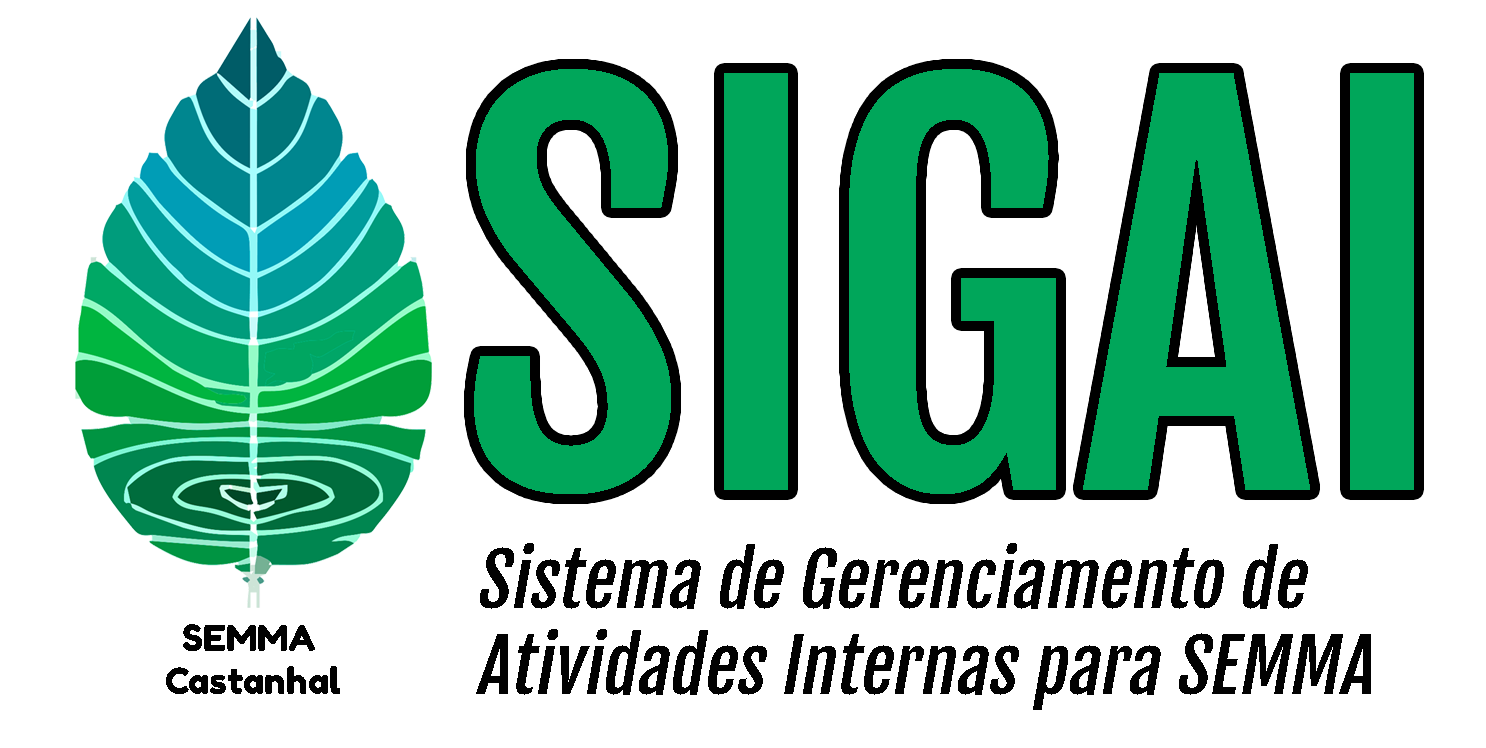
<style>
.page{position:relative;width:1486px;height:748px;background:#ffffff}
.page>*{position:absolute;margin:0}
.t1{font:500px "FjallaOne-Regular";color:#00a65a}
.t2{font:72px "FjallaOne-Regular";color:#020202;font-style:italic}
.t3{font:36px "FredokaOne-Regular";color:#020202}
.t4{font:36px "FredokaOne-Regular";color:#020202;text-transform:uppercase}
</style>
<div class="page">
<p class="t1" style="left:474px;top:69px;width:940px;height:425px">SIGAI</p>
<p class="t2" style="left:476px;top:543px;width:895px;height:167px">Sistema de Gerenciamento de Atividades Internas para SEMMA</p>
<p class="t3" style="left:166px;top:624px;width:174px;height:70px;text-align:center"><span class="t4">Semma <br></span>Castanhal</p>
</div>
